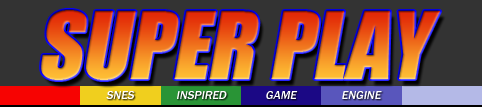
<style>
.page{position:relative;width:482px;height:107px;background:#333333}
.page>*{position:absolute;margin:0}
.t1{font:86px "Impact";text-transform:uppercase;font-style:italic}
.t2{font:12px "FranklinGothic-Medium";color:#ffffff;text-transform:uppercase;font-style:italic}
</style>
<div class="page">
<p class="t1" style="left:41px;top:10px;width:399px;height:70px">Super Play</p>
<p class="t2" style="left:106px;top:91px;width:276px;height:8px">SNES              inspired             Game               ENGINE</p>
</div>
